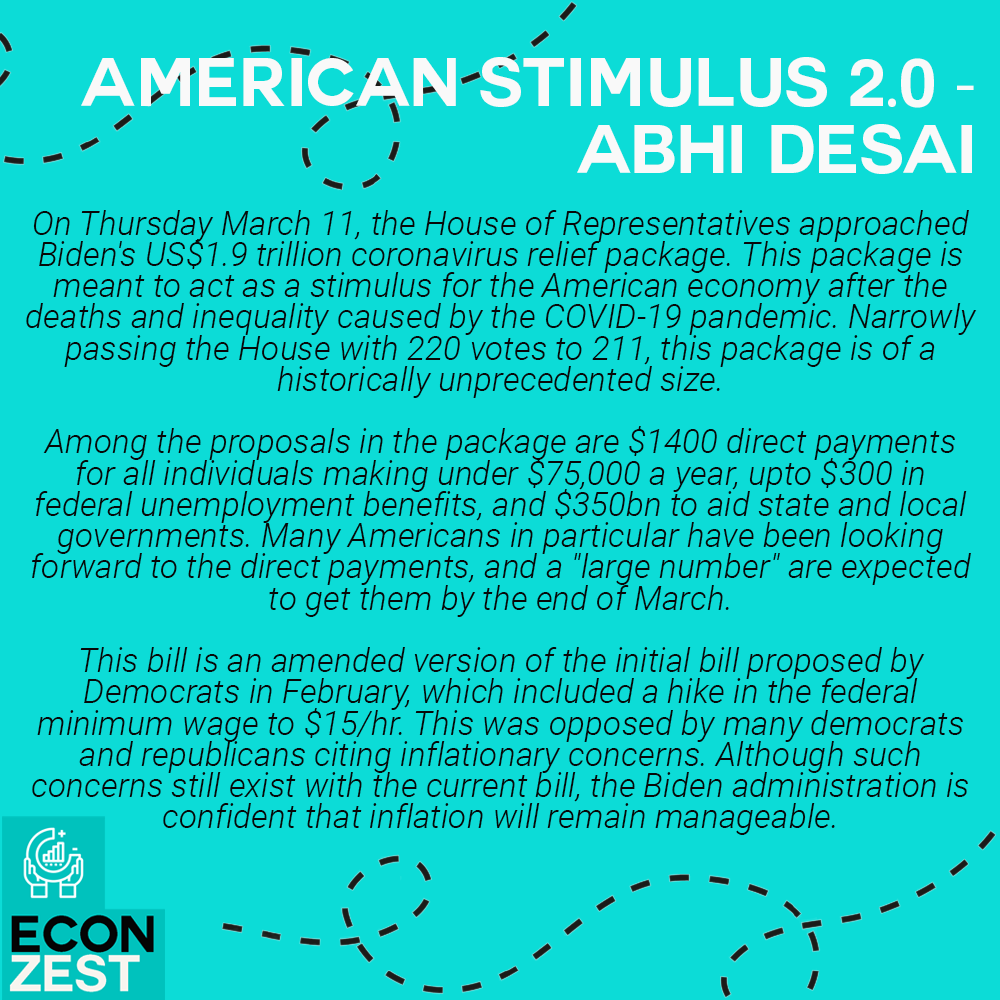
<style>
.page{position:relative;width:1000px;height:1000px;background:#0cdcd7}
.page>*{position:absolute;margin:0}
.t1{font:33.3px/31.2px "Roboto-LightItalic";color:#080808}
.t2{font:30.1px/30.1px "Couture-Bold";color:#f9f9f9}
.t3{font:66.7px/66.7px "Couture-Bold";color:#f9f9f9}
.t4{font:66.7px/66.7px "MyriadPro-Regular";color:#f9f9f9}
</style>
<div class="page">
<p class="t1" style="left:26px;top:57px;width:951px;height:778px;text-align:center"><span class="t2"><br></span><span class="t3">American Stimulus 2</span><span class="t4">.</span><span class="t3">0 </span><span class="t4">-</span><span class="t3"> Abhi Desai<br><br></span>On Thursday March 11, the House of Representatives approached Biden's US$1.9 trillion coronavirus relief package. This package is meant to act as a stimulus for the American economy after the deaths and inequality caused by the COVID-19 pandemic. Narrowly passing the House with 220 votes to 211, this package is of a historically unprecedented size.<br><br>Among the proposals in the package are $1400 direct payments for all individuals making under $75,000 a year, upto $300 in federal unemployment benefits, and $350bn to aid state and local governments. Many Americans in particular have been looking forward to the direct payments, and a "large number" are expected to get them by the end of March.<br><br>This bill is an amended version of the initial bill proposed by Democrats in February, which included a hike in the federal minimum wage to $15/hr. This was opposed by many democrats and republicans citing inflationary concerns. Although such concerns still exist with the current bill, the Biden administration is confident that inflation will remain manageable.</p>
</div>
